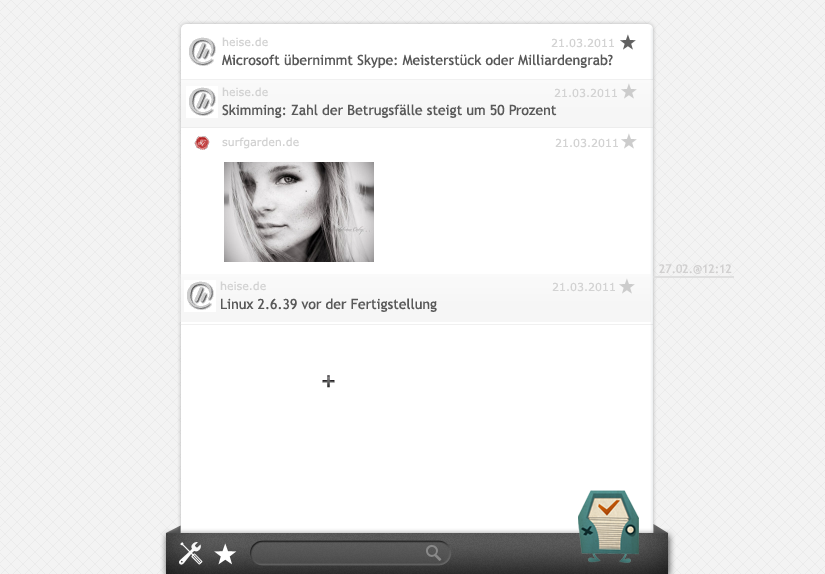
<style>
.page{position:relative;width:825px;height:574px;background:#f3f3f3}
.page>*{position:absolute;margin:0}
.t1{font:11px "Verdana";color:#d2d2d2}
.t2{font:14px "TrebuchetMS";color:#595959}
.t3{font:12px "TrebuchetMS";color:#d1d0d0}
.t4{font:18px "Verdana-Bold"}
</style>
<div class="page">
<p class="t1" style="left:222px;top:37px;width:46px;height:10px">heise.de</p>
<p class="t1" style="left:551px;top:38px;width:63px;height:10px">21.03.2011</p>
<p class="t2" style="left:222px;top:54px;width:391px;height:14px">Microsoft übernimmt Skype: Meisterstück oder Milliardengrab?</p>
<p class="t1" style="left:222px;top:87px;width:46px;height:10px">heise.de</p>
<p class="t1" style="left:554px;top:88px;width:63px;height:10px">21.03.2011</p>
<p class="t2" style="left:222px;top:104px;width:335px;height:14px">Skimming: Zahl der Betrugsfälle steigt um 50 Prozent</p>
<p class="t1" style="left:222px;top:137px;width:77px;height:12px">surfgarden.de</p>
<p class="t1" style="left:555px;top:138px;width:63px;height:10px">21.03.2011</p>
<p class="t3" style="left:659px;top:264px;width:73px;height:10px">27.02.@12:12</p>
<p class="t1" style="left:220px;top:281px;width:46px;height:10px">heise.de</p>
<p class="t1" style="left:552px;top:282px;width:63px;height:10px">21.03.2011</p>
<p class="t2" style="left:221px;top:298px;width:216px;height:14px">Linux 2.6.39 vor der Fertigstellung</p>
<p class="t4" style="left:322px;top:375px;width:13px;height:13px">+</p>
</div>
